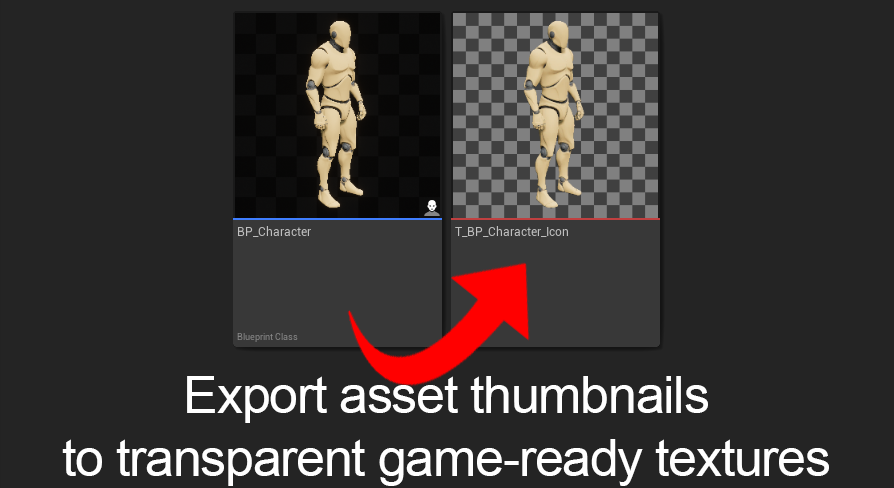
<style>
.page{position:relative;width:894px;height:488px;background:#242424}
.page>*{position:absolute;margin:0}
.t1{font:52px "ArialMT";letter-spacing:-0.025em;color:#ffffff}
</style>
<div class="page">
<p class="t1" style="left:62px;top:376px;width:767px;height:110px;text-align:center">Export asset thumbnails<br>to transparent game-ready textures</p>
</div>
